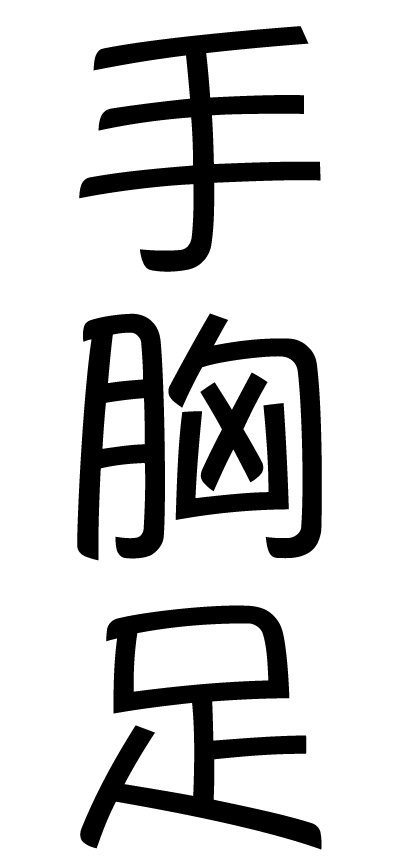
<style>
.page{position:relative;width:400px;height:864px;background:#ffffff}
.page>*{position:absolute;margin:0}
.t1{font:288px/288px "YuppySC-Regular";color:#000000}
</style>
<div class="page">
<p class="t1" style="left:77px;top:26px;width:245px;height:824px">手<br>胸<br>足</p>
</div>
